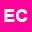
<style>
.page{position:relative;width:32px;height:32px;background:#ff0099}
.page>*{position:absolute;margin:0}
.t1{font:18px "Arial-BoldMT";color:#ffffff}
</style>
<div class="page">
<p class="t1" style="left:4px;top:9px;width:24px;height:13px">EC</p>
</div>
